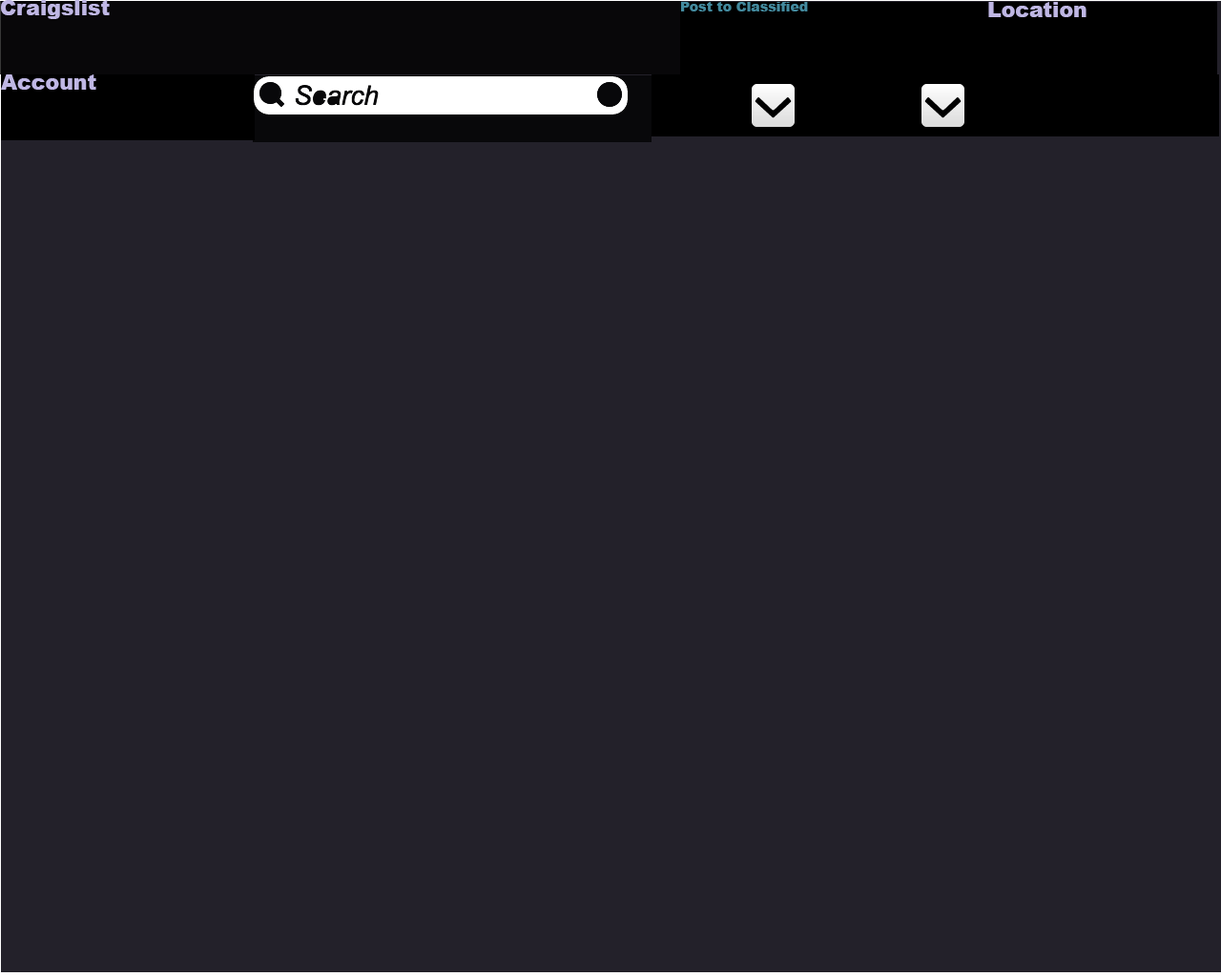
<style>
.page{position:relative;width:1221px;height:977px;background:#23212a}
.page>*{position:absolute;margin:0}
.t1{font:21px "Arial-Black";color:#bfb7e4}
.t2{font:13.4px "Arial-Black";color:#43899d}
</style>
<div class="page">
<p class="t1" style="left:1px;top:0px;width:109px;height:19px">Craigslist</p>
<p class="t2" style="left:681px;top:2px;width:127px;height:9px">Post to Classified</p>
<p class="t1" style="left:988px;top:2px;width:98px;height:15px">Location</p>
<p class="t1" style="left:1px;top:74px;width:95px;height:16px">Account</p>
</div>
